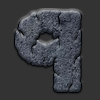
<style>
.page{position:relative;width:100px;height:100px;background:#333333}
.page>*{position:absolute;margin:0}
.t1{font:100px "JFRockSolid"}
</style>
<div class="page">
<p class="t1" style="left:15px;top:10px;width:67px;height:82px">9</p>
</div>
